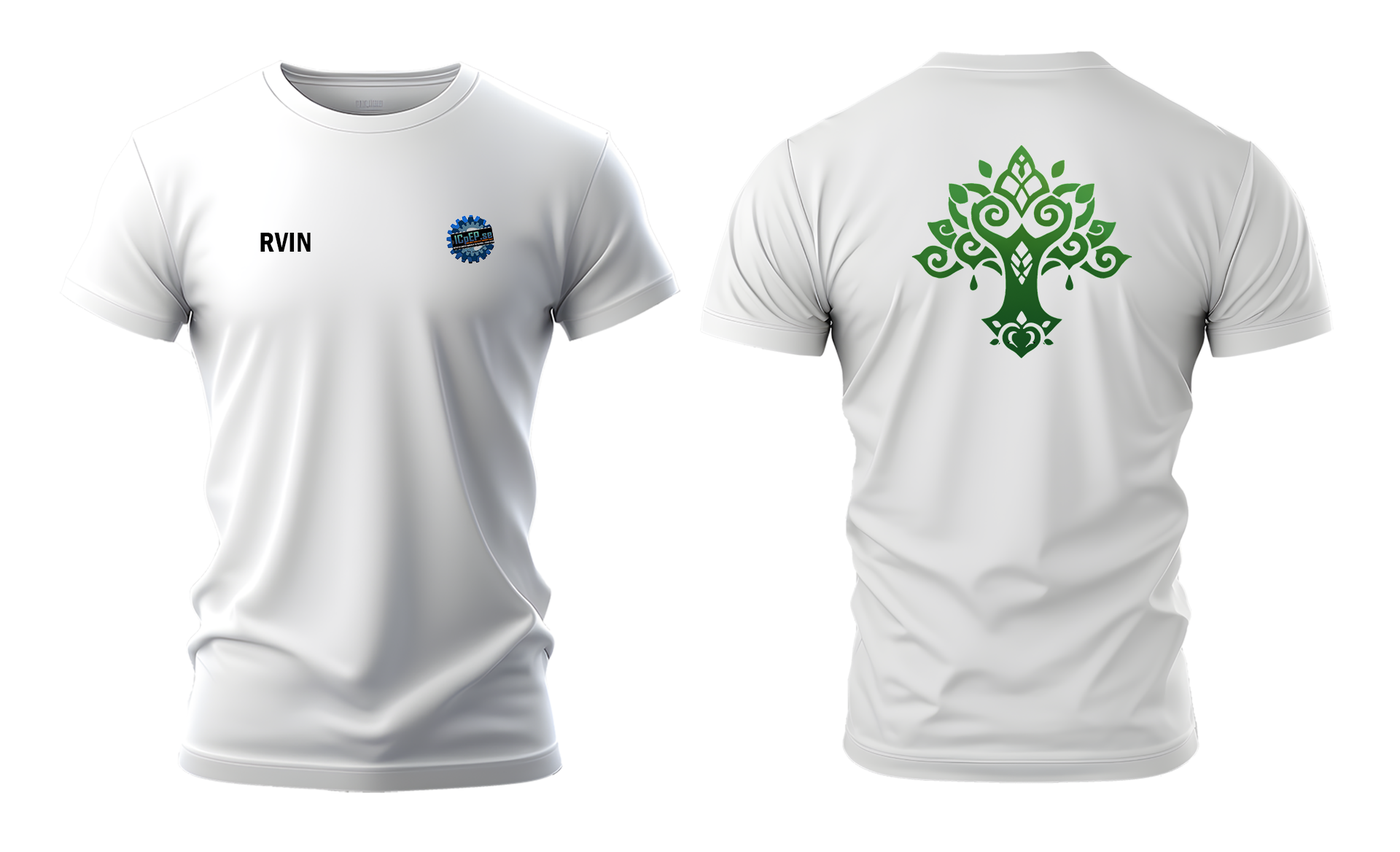
<style>
.page{position:relative;width:1400px;height:852px;background:#ffffff}
.page>*{position:absolute;margin:0}
.t1{font:28.7px "FranklinGothic-DemiCond";color:#000000}
</style>
<div class="page">
<p class="t1" style="left:260px;top:233px;width:51px;height:19px">RVIN</p>
</div>
